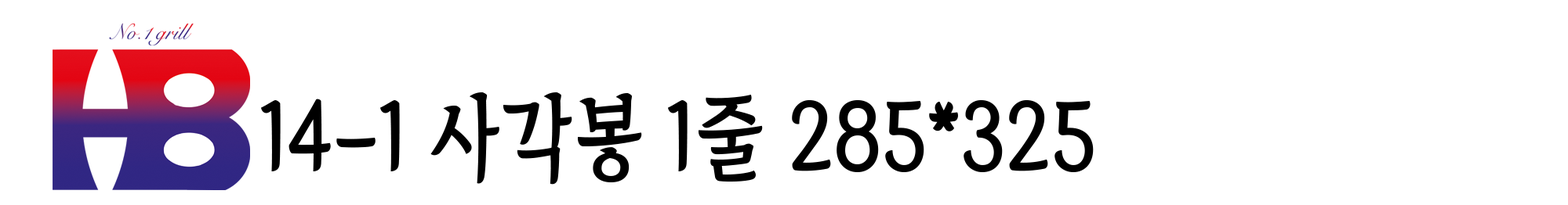
<style>
.page{position:relative;width:1568px;height:205px;background:#ffffff}
.page>*{position:absolute;margin:0}
.t1{font:93.7px "TheIndependenceHallofKorea-Regular";color:#000000;scale:0.89 1}
</style>
<div class="page">
<p class="t1" style="left:261px;top:93px;width:833px;height:92px">14-1 사각봉 1줄 285*325</p>
</div>
